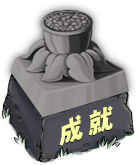
<style>
.page{position:relative;width:139px;height:165px;background:#ffffff}
.page>*{position:absolute;margin:0}
.t1{font:28.8px "MaokenAssortedSansBold-Regular";letter-spacing:0.14em;color:#fdffa3;text-transform:uppercase;scale:1.04 1}
</style>
<div class="page">
<p class="t1" style="left:59px;top:106px;width:54px;height:40px;rotate:-19deg">成就</p>
</div>
